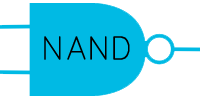
<style>
.page{position:relative;width:200px;height:100px;background:#00bae4}
.page>*{position:absolute;margin:0}
.t1{font:30px "SWSimp";color:#000000}
</style>
<div class="page">
<p class="t1" style="left:44px;top:36px;width:86px;height:24px">NAND</p>
</div>
